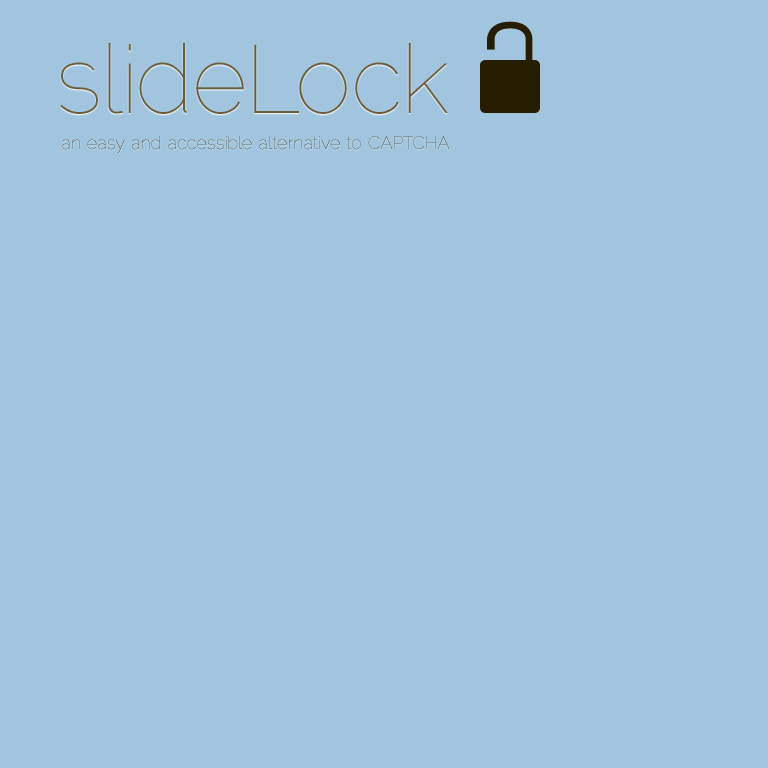
<style>
.page{position:relative;width:768px;height:768px;background:#a1c5df}
.page>*{position:absolute;margin:0}
.t1{font:96px "Raleway-Thin";color:#695f3f}
.t2{font:18px "Raleway-Thin"}
</style>
<div class="page">
<p class="t1" style="left:60px;top:43px;width:388px;height:71px">slideLock</p>
<p class="t2" style="left:62px;top:135px;width:388px;height:18px">an easy and accessible alternative to CAPTCHA</p>
</div>
